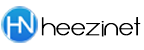
<style>
.page{position:relative;width:144px;height:50px;background:#ffffff}
.page>*{position:absolute;margin:0}
.t1{font:30px "Infinita";color:#000000;font-weight:bold}
</style>
<div class="page">
<p class="t1" style="left:41px;top:17px;width:100px;height:20px">heeZinet</p>
</div>
